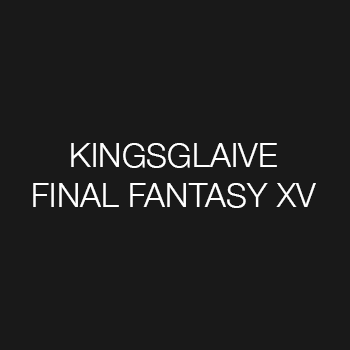
<style>
.page{position:relative;width:350px;height:350px;background:#191919}
.page>*{position:absolute;margin:0}
.t1{font:33.3px "HelveticaNeue-Light";color:#ffffff}
</style>
<div class="page">
<p class="t1" style="left:33px;top:143px;width:283px;height:65px;text-align:center">KINGSGLAIVE<br>FINAL FANTASY XV</p>
</div>
